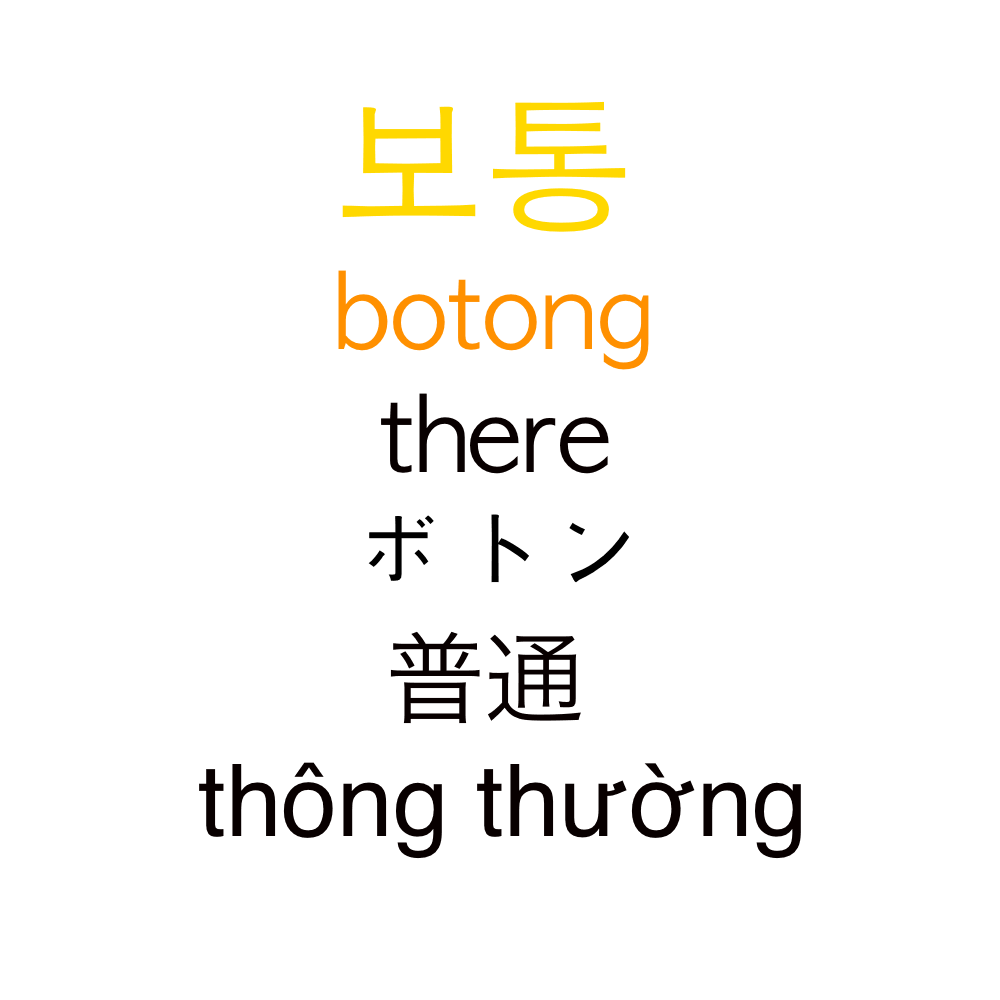
<style>
.page{position:relative;width:1000px;height:1000px;background:#ffffff}
.page>*{position:absolute;margin:0}
.t1{font:150px "AppleGothic";color:#ffd800}
.t2{font:100px "AppleGothic";color:#ff9000}
.t3{font:100px "AppleGothic";color:#080000}
.t4{font:100px "AppleGothic";color:#000000}
.t5{font:100px "HiraKakuProN-W3";color:#080000}
.t6{font:100px "Helvetica";color:#080000}
</style>
<div class="page">
<p class="t1" style="left:342px;top:101px;width:284px;height:131px">보통</p>
<p class="t2" style="left:338px;top:270px;width:311px;height:100px">botong</p>
<p class="t3" style="left:381px;top:393px;width:228px;height:81px">there</p>
<p class="t4" style="left:368px;top:514px;width:261px;height:69px">ボトン</p>
<p class="t5" style="left:390px;top:631px;width:191px;height:93px">普通</p>
<p class="t6" style="left:199px;top:762px;width:602px;height:97px">thông thường</p>
</div>
